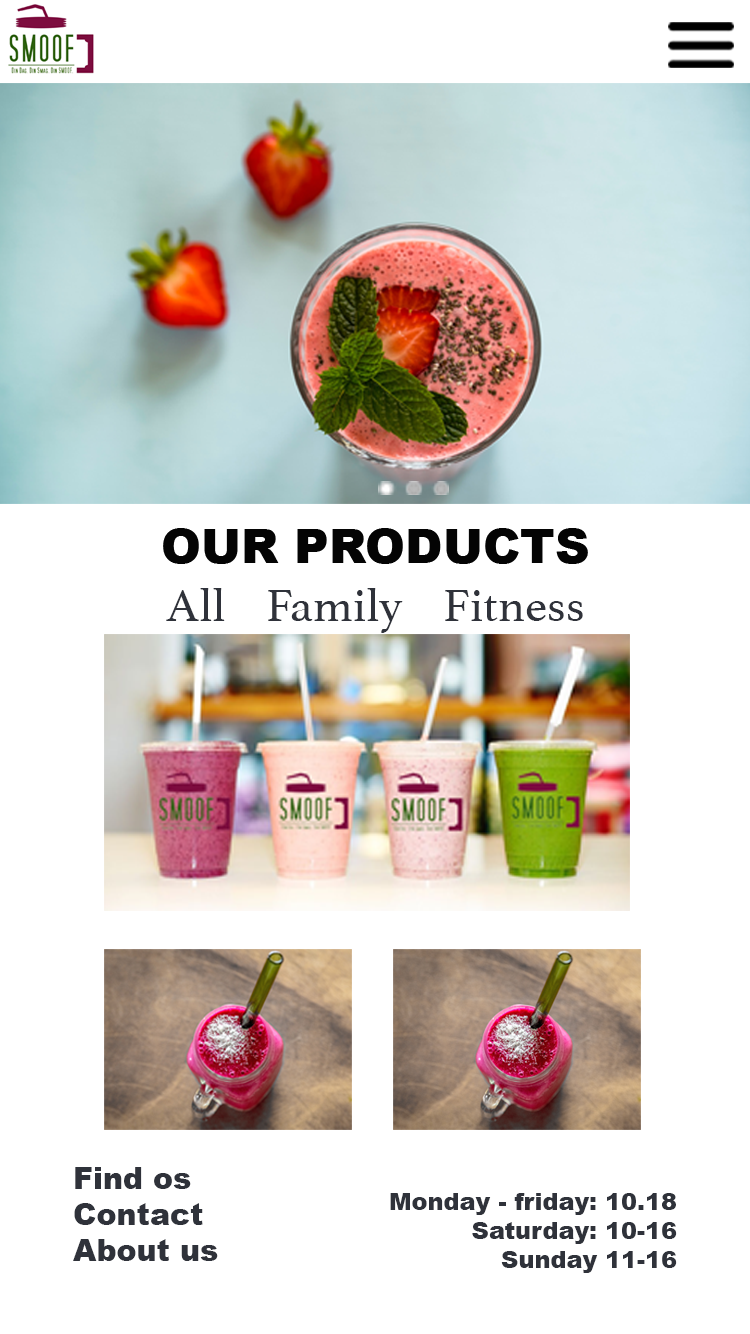
<style>
.page{position:relative;width:750px;height:1334px;background:#ffffff}
.page>*{position:absolute;margin:0}
.t1{font:48px "Athelas-Regular";color:#2f323a}
.t2{font:30px "Arial-Black";color:#2f323a}
.t3{font:24px "Arial-Black";color:#2f323a}
</style>
<div class="page">
<p class="t1" style="left:166px;top:588px;width:417px;height:45px">All    Family    Fitness</p>
<p class="t2" style="left:73px;top:1167px;width:145px;height:94px">Find os<br>Contact <br>About us</p>
<p class="t3" style="left:390px;top:1193px;width:287px;height:80px;text-align:right">Monday - friday: 10.18<br>Saturday: 10-16<br>Sunday 11-16</p>
</div>
